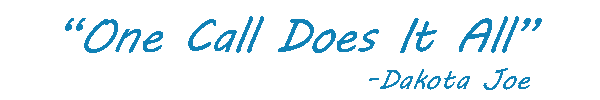
<style>
.page{position:relative;width:600px;height:100px;background:#ffffff}
.page>*{position:absolute;margin:0}
.t1{font:48px "MVBoli";letter-spacing:-0.025em;color:#1081b6;font-style:italic}
.t2{font:48px "MVBoli";color:#1081b6;font-style:italic}
</style>
<div class="page">
<p class="t1" style="left:65px;top:16px;width:477px;height:37px">“One Call Does It All”</p>
<p class="t2" style="left:369px;top:68px;width:161px;height:22px">-Dakota Joe</p>
</div>
